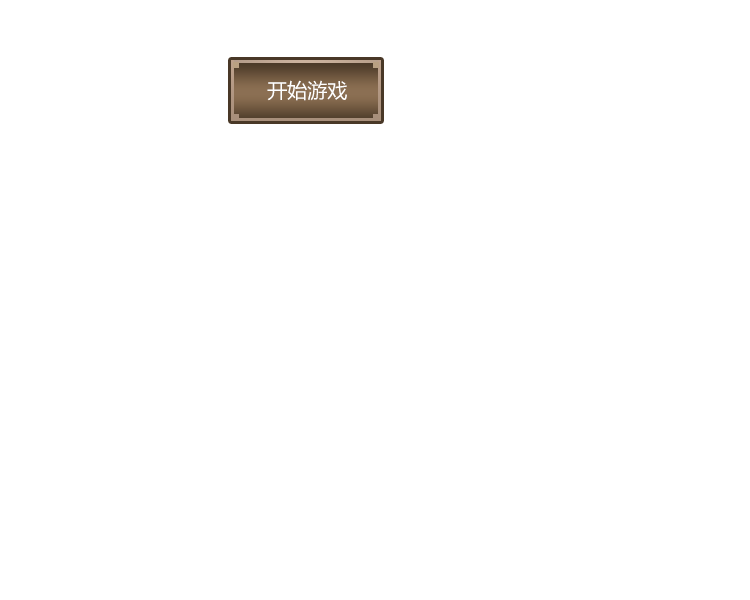
<style>
.page{position:relative;width:750px;height:600px;background:#ffffff}
.page>*{position:absolute;margin:0}
.t1{font:20px "MicrosoftYaHei";color:#ffffff}
</style>
<div class="page">
<p class="t1" style="left:267px;top:80px;width:80px;height:21px">开始游戏</p>
</div>
